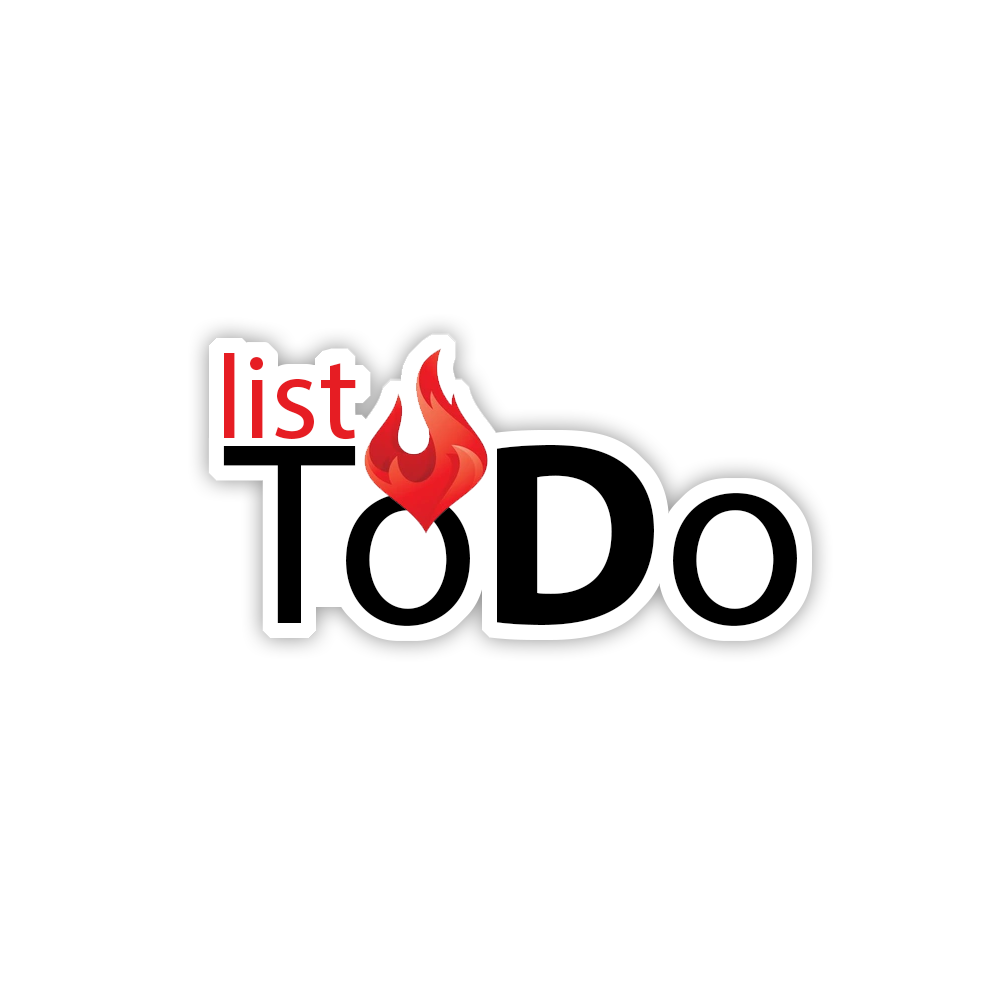
<style>
.page{position:relative;width:1000px;height:1000px;background:#ffffff}
.page>*{position:absolute;margin:0}
.t1{font:120.1px "MyriadPro-Regular";color:#e61d23}
.t2{font:262.8px "MyriadPro-Regular";color:#000000}
.t3{font:262.8px "MyriadPro-Bold";color:#000000}
</style>
<div class="page">
<p class="t1" style="left:224px;top:353px;width:132px;height:87px">list</p>
<p class="t2" style="left:223px;top:445px;width:574px;height:181px">To<span class="t3">D</span>o</p>
</div>
